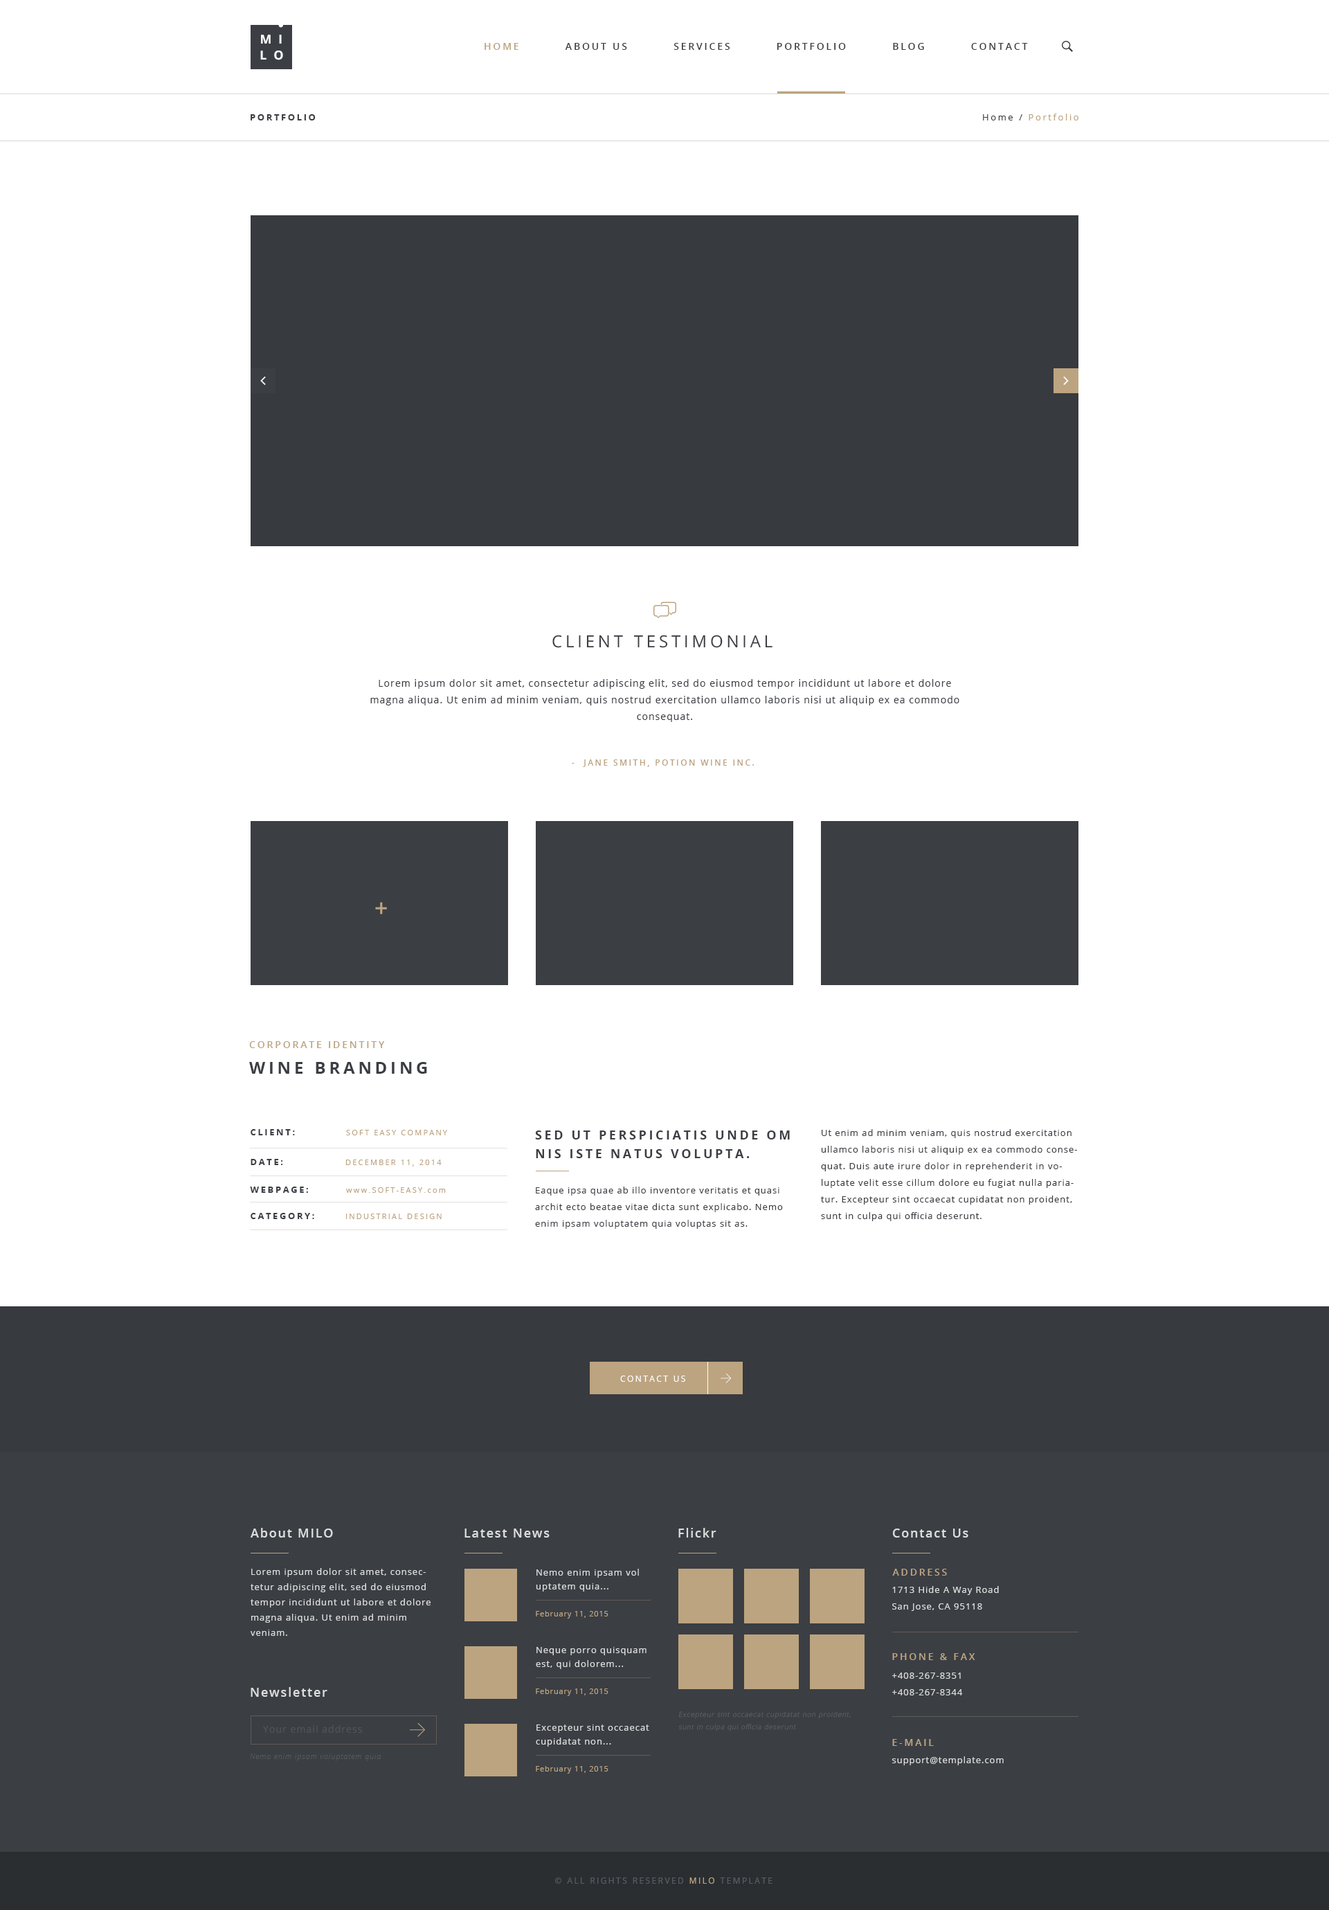
<style>
.page{position:relative;width:1329px;height:1910px;background:#ffffff}
.page>*{position:absolute;margin:0}
.t1{font:12.5px "OpenSans-Bold";letter-spacing:0.55em;color:#ffffff;text-transform:uppercase}
.t2{font:9.7px "OpenSans-Semibold";letter-spacing:0.2em;color:#3b3e43;text-transform:uppercase}
.t3{font:9.7px "OpenSans-Semibold";letter-spacing:0.2em;color:#bca480;text-transform:uppercase}
.t4{font:9px "OpenSans";letter-spacing:0.2em;color:#bca480}
.t5{font:9px "OpenSans";letter-spacing:0.2em;color:#3b3e43}
.t6{font:9px "OpenSans-Bold";letter-spacing:0.2em;color:#3b3e43;text-transform:uppercase}
.t7{font:16.6px "OpenSans";letter-spacing:0.2em;color:#3b3e43;text-transform:uppercase}
.t8{font:9.7px/16.6px "OpenSans";letter-spacing:0.075em;color:#3b3e43}
.t9{font:8.3px "OpenSans-Semibold";letter-spacing:0.2em;color:#bca480;text-transform:uppercase}
.t10{font:23.7px "OpenSans-Semibold";letter-spacing:0.075em;color:#bca480;text-transform:uppercase}
.t11{font:16.6px "OpenSans-Bold";letter-spacing:0.2em;color:#3b3e43;text-transform:uppercase}
.t12{font:7.6px "OpenSans";letter-spacing:0.2em;color:#bca480;text-transform:uppercase}
.t13{font:9px/16.6px "OpenSans";letter-spacing:0.075em;color:#3b3e43}
.t14{font:12.5px/18.7px "OpenSans-Bold";letter-spacing:0.2em;color:#3b3e43;text-transform:uppercase}
.t15{font:7.6px "OpenSans";letter-spacing:0.2em;color:#bca480}
.t16{font:8.3px "OpenSans";letter-spacing:0.2em;color:#ffffff;text-transform:uppercase}
.t17{font:12.5px "OpenSans-Semibold";letter-spacing:0.1em;color:#dddddd}
.t18{font:9px/15.2px "OpenSans";letter-spacing:0.075em;color:#dddddd}
.t19{font:9px/13.8px "OpenSans";letter-spacing:0.075em;color:#dddddd}
.t20{font:9px/16.6px "OpenSans";letter-spacing:0.075em;color:#dddddd}
.t21{font:7.6px "OpenSans";letter-spacing:0.075em;color:#bca480}
.t22{font:9px/16.6px "OpenSans-Semibold";letter-spacing:0.075em;color:#dddddd}
.t23{font:6.9px/12.5px "OpenSans-Light";letter-spacing:0.075em;color:#585c62;font-style:italic}
.t24{font:9.7px "OpenSans";letter-spacing:0.075em;color:#505459}
.t25{font:7.6px "OpenSansLight-Italic";letter-spacing:0.075em;color:#53575d}
.t26{font:9px "OpenSans";letter-spacing:0.075em;color:#dddddd}
.t27{font:8.3px "OpenSans";letter-spacing:0.2em;color:#585c62;text-transform:uppercase}
.t28{font:8.3px "OpenSans";letter-spacing:0.2em;color:#bca480;text-transform:uppercase}
</style>
<div class="page">
<p class="t1" style="left:261px;top:35px;width:21px;height:9px">mi</p>
<p class="t1" style="left:260px;top:51px;width:23px;height:9px">lo</p>
<p class="t2" style="left:485px;top:43px;width:543px;height:7px"><span class="t3">Home          </span>About Us          Services          Portfolio          Blog          Contact</p>
<p class="t4" style="left:983px;top:114px;width:96px;height:6px"><span class="t5">Home / </span>Portfolio</p>
<p class="t6" style="left:251px;top:114px;width:65px;height:6px">Portfolio</p>
<p class="t7" style="left:552px;top:635px;width:221px;height:13px">client testimonial</p>
<p class="t8" style="left:370px;top:679px;width:590px;height:43px;text-align:center">Lorem ipsum dolor sit amet, consectetur adipiscing elit, sed do eiusmod tempor incididunt ut labore et dolore magna aliqua. Ut enim ad minim veniam, quis nostrud exercitation ullamco laboris nisi ut aliquip ex ea commodo consequat.</p>
<p class="t9" style="left:572px;top:759px;width:182px;height:8px">-  jane smith, potion wine inc.</p>
<p class="t10" style="left:375px;top:902px;width:12px;height:13px">+</p>
<p class="t3" style="left:249px;top:1041px;width:136px;height:7px">corporate identity</p>
<p class="t11" style="left:249px;top:1062px;width:178px;height:12px">Wine branding</p>
<p class="t6" style="left:251px;top:1129px;width:44px;height:6px">client:</p>
<p class="t12" style="left:346px;top:1130px;width:101px;height:5px">Soft easy Company</p>
<p class="t13" style="left:535px;top:1131px;width:255px;height:98px"><span class="t14">Sed ut perspiciatis unde om nis iste natus volupta.<br><br></span>Eaque ipsa quae ab illo inventore veritatis et quasi archit ecto beatae vitae dicta sunt explicabo. Nemo enim ipsam voluptatem quia voluptas sit as.</p>
<p class="t13" style="left:821px;top:1129px;width:256px;height:92px">Ut enim ad minim veniam, quis nostrud exercitation ullamco laboris nisi ut aliquip ex ea commodo consequat. Duis aute irure dolor in reprehenderit in voluptate velit esse cillum dolore eu fugiat nulla pariatur. Excepteur sint occaecat cupidatat non proident, sunt in culpa qui officia deserunt.</p>
<p class="t6" style="left:251px;top:1159px;width:32px;height:6px">date:</p>
<p class="t12" style="left:345px;top:1160px;width:97px;height:7px">December 11, 2014</p>
<p class="t6" style="left:250px;top:1187px;width:58px;height:6px">weBpage:</p>
<p class="t12" style="left:346px;top:1187px;width:100px;height:6px"><span class="t15">www</span>.Soft-easy.<span class="t15">com</span></p>
<p class="t6" style="left:251px;top:1213px;width:63px;height:6px">category:</p>
<p class="t12" style="left:346px;top:1214px;width:96px;height:5px">Industrial design</p>
<p class="t16" style="left:620px;top:1376px;width:65px;height:6px">contact us</p>
<p class="t17" style="left:251px;top:1528px;width:82px;height:10px">About MILO</p>
<p class="t17" style="left:465px;top:1529px;width:85px;height:9px">Latest News</p>
<p class="t17" style="left:678px;top:1528px;width:39px;height:10px">Flickr</p>
<p class="t17" style="left:892px;top:1529px;width:77px;height:9px">Contact Us</p>
<p class="t18" style="left:251px;top:1568px;width:180px;height:68px">Lorem ipsum dolor sit amet, consectetur adipiscing elit, sed do eiusmod tempor incididunt ut labore et dolore magna aliqua. Ut enim ad minim veniam.</p>
<p class="t19" style="left:536px;top:1569px;width:103px;height:23px">Nemo enim ipsam vol uptatem quia...</p>
<p class="t3" style="left:892px;top:1569px;width:55px;height:7px">Address</p>
<p class="t20" style="left:892px;top:1586px;width:107px;height:25px">1713 Hide A Way Road<br>San Jose, CA 95118</p>
<p class="t21" style="left:536px;top:1611px;width:73px;height:8px">February 11, 2015</p>
<p class="t19" style="left:536px;top:1647px;width:111px;height:22px">Neque porro quisquam est, qui dolorem...</p>
<p class="t3" style="left:892px;top:1653px;width:83px;height:7px">Phone &amp; Fax</p>
<p class="t20" style="left:892px;top:1673px;width:71px;height:22px"><span class="t22"><br></span>+408-267-8351<br>+408-267-8344</p>
<p class="t17" style="left:251px;top:1687px;width:76px;height:10px">Newsletter</p>
<p class="t21" style="left:536px;top:1689px;width:73px;height:7px">February 11, 2015</p>
<p class="t23" style="left:678px;top:1711px;width:173px;height:20px">Excepteur sint occaecat cupidatat non proident, sunt in culpa qui officia deserunt</p>
<p class="t24" style="left:263px;top:1725px;width:99px;height:8px">Your email address</p>
<p class="t19" style="left:536px;top:1725px;width:113px;height:22px">Excepteur sint occaecat cupidatat non...</p>
<p class="t3" style="left:892px;top:1739px;width:42px;height:7px">E-mail</p>
<p class="t25" style="left:250px;top:1754px;width:131px;height:7px">Nemo enim ipsam voluptatem quia</p>
<p class="t26" style="left:892px;top:1756px;width:112px;height:9px">support@template.com</p>
<p class="t21" style="left:536px;top:1766px;width:73px;height:8px">February 11, 2015</p>
<p class="t27" style="left:555px;top:1878px;width:218px;height:6px">© All Rights Reserved <span class="t28">MILO</span> template</p>
</div>
